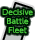
<style>
.page{position:relative;width:35px;height:40px;background:#ffffff}
.page>*{position:absolute;margin:0}
.t1{font:7px/9px "UDShinGoPro-Light";color:#4bcb3d;font-weight:bold}
</style>
<div class="page">
<p class="t1" style="left:2px;top:9px;width:31px;height:25px;text-align:center">Decisive<br>Battle<br>Fleet</p>
</div>
